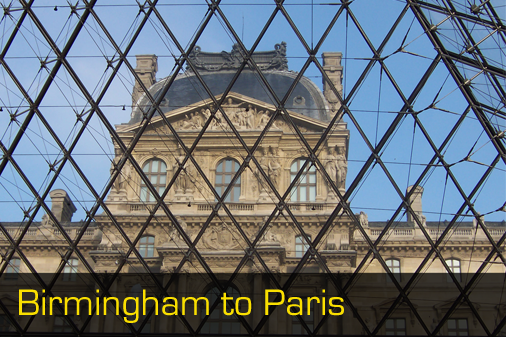
<style>
.page{position:relative;width:506px;height:337px}
.page>*{position:absolute;margin:0}
.t1{font:38.3px "EurostileRegular";color:#fadf00}
</style>
<div class="page">
<p class="t1" style="left:19px;top:289px;width:325px;height:34px">Birmingham to Paris</p>
</div>
